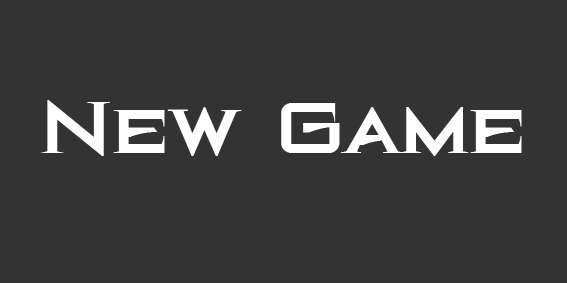
<style>
.page{position:relative;width:567px;height:283px;background:#333333}
.page>*{position:absolute;margin:0}
.t1{font:100px "BlackHoleBB";color:#ffffff}
</style>
<div class="page">
<p class="t1" style="left:41px;top:100px;width:481px;height:56px">New Game</p>
</div>
